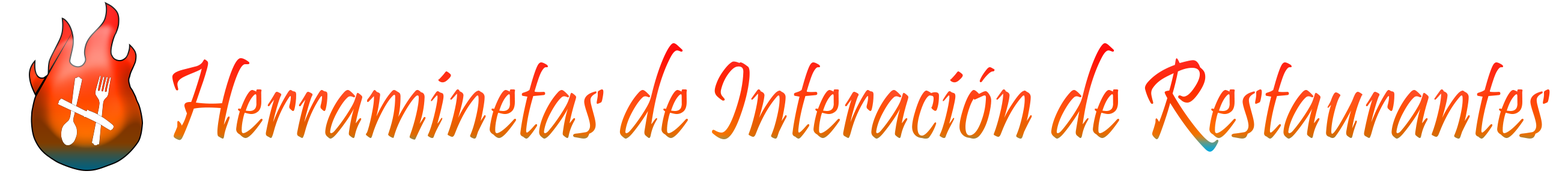
<style>
.page{position:relative;width:1568px;height:180px;background:#ffffff}
.page>*{position:absolute;margin:0}
.t1{font:115.4px "Pristina-Regular";scale:0.86 1}
</style>
<div class="page">
<p class="t1" style="left:172px;top:43px;width:1378px;height:109px">Herraminetas de Interación de Restaurantes</p>
</div>
